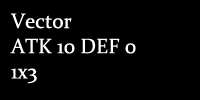
<style>
.page{position:relative;width:200px;height:100px;background:#000000}
.page>*{position:absolute;margin:0}
.t1{font:21px "Constantia";color:#ffffff}
</style>
<div class="page">
<p class="t1" style="left:10px;top:13px;width:126px;height:71px">Vector<br>ATK 10 DEF 0<br>1x3</p>
</div>
